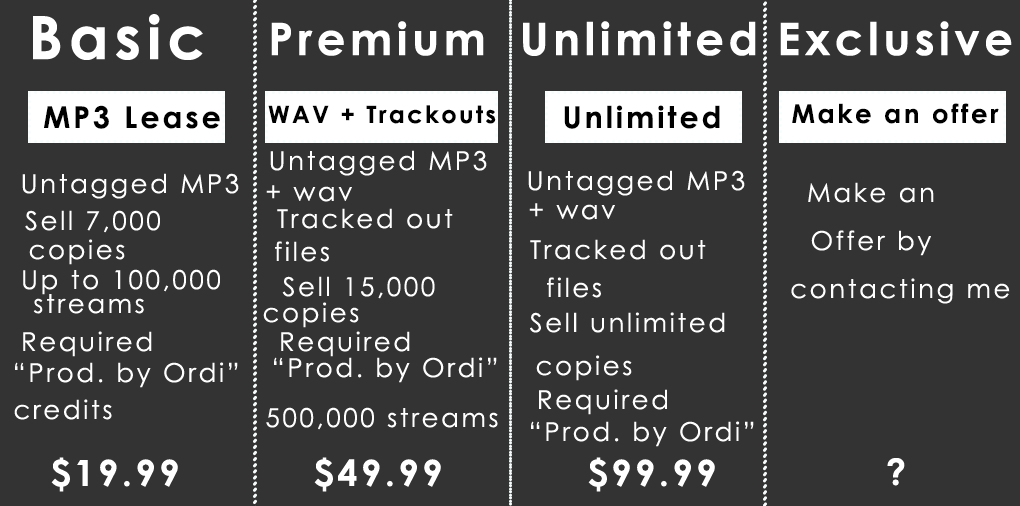
<style>
.page{position:relative;width:1020px;height:506px;background:#333333}
.page>*{position:absolute;margin:0}
.t1{font:60px "CenturyGothic-Bold";letter-spacing:0.1em;color:#ffffff}
.t2{font:45px "CenturyGothic-Bold";letter-spacing:0.1em;color:#ffffff}
.t3{font:30px "CenturyGothic-Bold";letter-spacing:0.1em;color:#000000}
.t4{font:24px "CenturyGothic-Bold";letter-spacing:0.1em;color:#000000}
.t5{font:26px "CenturyGothic-Bold";letter-spacing:0.1em;color:#000000}
.t6{font:26px "CenturyGothic";letter-spacing:0.1em;color:#ffffff}
.t7{font:26px/48px "CenturyGothic";letter-spacing:0.1em;color:#ffffff}
.t8{font:36px "CenturyGothic-Bold";letter-spacing:0.1em;color:#ffffff}
</style>
<div class="page">
<p class="t1" style="left:33px;top:14px;width:170px;height:46px">Basic</p>
<p class="t2" style="left:271px;top:21px;width:213px;height:35px">Premium</p>
<p class="t2" style="left:523px;top:21px;width:233px;height:35px">Unlimited</p>
<p class="t2" style="left:780px;top:21px;width:232px;height:35px">Exclusive</p>
<p class="t3" style="left:44px;top:105px;width:176px;height:24px">MP3 Lease</p>
<p class="t4" style="left:268px;top:105px;width:228px;height:19px">WAV + Trackouts</p>
<p class="t3" style="left:564px;top:105px;width:156px;height:24px">Unlimited</p>
<p class="t5" style="left:792px;top:103px;width:207px;height:21px">Make an offer</p>
<p class="t6" style="left:270px;top:150px;width:217px;height:26px">Untagged MP3</p>
<p class="t6" style="left:22px;top:173px;width:217px;height:26px">Untagged MP3</p>
<p class="t6" style="left:528px;top:170px;width:217px;height:26px">Untagged MP3</p>
<p class="t6" style="left:266px;top:185px;width:86px;height:17px">+ wav</p>
<p class="t7" style="left:791px;top:182px;width:219px;height:122px;text-align:center">Make an<br>  Offer by <br>       contacting me</p>
<p class="t6" style="left:277px;top:208px;width:176px;height:21px">Tracked out</p>
<p class="t6" style="left:529px;top:203px;width:86px;height:17px">+ wav</p>
<p class="t6" style="left:25px;top:210px;width:135px;height:23px">Sell 7,000</p>
<p class="t6" style="left:29px;top:239px;width:96px;height:26px">copies</p>
<p class="t6" style="left:275px;top:241px;width:54px;height:21px">files</p>
<p class="t6" style="left:530px;top:239px;width:176px;height:21px">Tracked out</p>
<p class="t6" style="left:23px;top:269px;width:197px;height:26px">Up to 100,000</p>
<p class="t6" style="left:282px;top:276px;width:153px;height:23px">Sell 15,000</p>
<p class="t6" style="left:547px;top:277px;width:54px;height:21px">files</p>
<p class="t6" style="left:33px;top:294px;width:111px;height:20px">streams</p>
<p class="t6" style="left:263px;top:302px;width:96px;height:26px">copies</p>
<p class="t6" style="left:530px;top:312px;width:195px;height:21px">Sell unlimited</p>
<p class="t6" style="left:23px;top:331px;width:129px;height:26px">Required</p>
<p class="t6" style="left:281px;top:331px;width:129px;height:26px">Required</p>
<p class="t6" style="left:15px;top:362px;width:223px;height:26px">“Prod. by Ordi”</p>
<p class="t6" style="left:274px;top:357px;width:223px;height:26px">“Prod. by Ordi”</p>
<p class="t6" style="left:536px;top:355px;width:96px;height:26px">copies</p>
<p class="t6" style="left:539px;top:389px;width:128px;height:26px">Required</p>
<p class="t6" style="left:14px;top:399px;width:98px;height:21px">credits</p>
<p class="t6" style="left:266px;top:407px;width:232px;height:23px">500,000 streams</p>
<p class="t6" style="left:531px;top:421px;width:223px;height:26px">“Prod. by Ordi”</p>
<p class="t8" style="left:51px;top:457px;width:127px;height:35px">$19.99</p>
<p class="t8" style="left:314px;top:457px;width:127px;height:35px">$49.99</p>
<p class="t8" style="left:588px;top:457px;width:127px;height:35px">$99.99</p>
<p class="t8" style="left:887px;top:458px;width:18px;height:28px">?</p>
</div>
